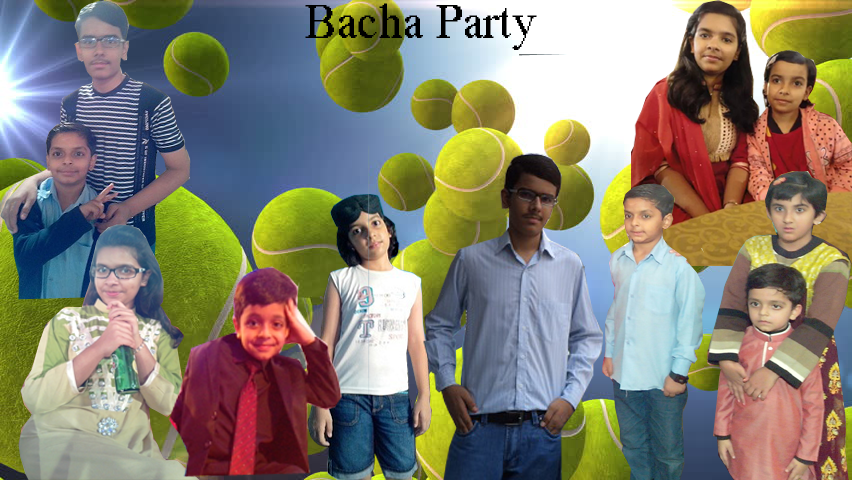
<style>
.page{position:relative;width:852px;height:480px}
.page>*{position:absolute;margin:0}
.t1{font:48px "MS Serif";color:#000000}
</style>
<div class="page">
<p class="t1" style="left:305px;top:3px;width:232px;height:47px">Bacha Party</p>
</div>
